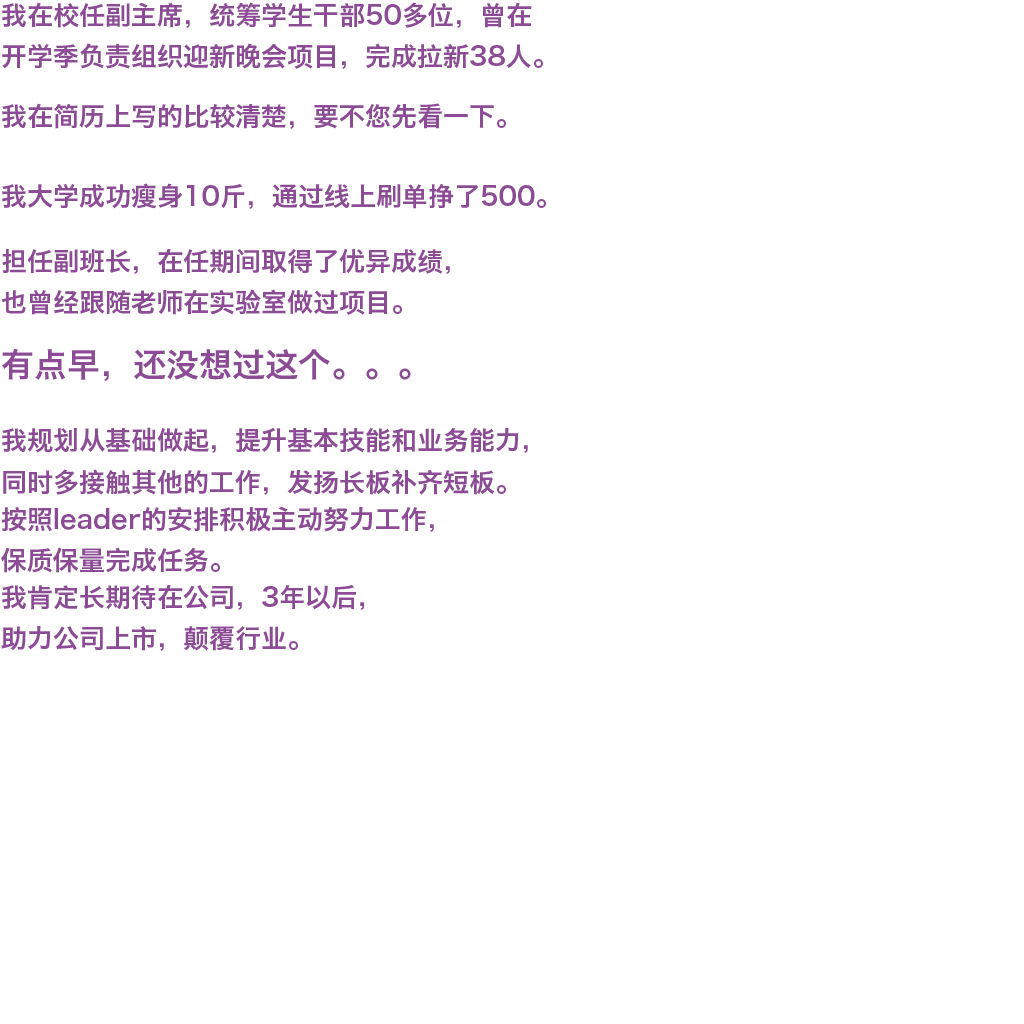
<style>
.page{position:relative;width:1024px;height:1024px;background:#ffffff}
.page>*{position:absolute;margin:0}
.t1{font:26px/41.6px "HiraginoSansGB-W6";color:#8c4b95}
.t2{font:26px "HiraginoSansGB-W6";color:#8c4b95}
.t3{font:33px "HiraginoSansGB-W6";color:#8c4b95}
</style>
<div class="page">
<p class="t1" style="left:2px;top:2px;width:541px;height:67px;text-align:justify">我在校任副主席，统筹学生干部50多位，曾在<br>开学季负责组织迎新晚会项目，完成拉新38人。</p>
<p class="t2" style="left:2px;top:103px;width:504px;height:26px">我在简历上写的比较清楚，要不您先看一下。</p>
<p class="t2" style="left:2px;top:183px;width:544px;height:26px">我大学成功瘦身10斤，通过线上刷单挣了500。</p>
<p class="t1" style="left:2px;top:248px;width:448px;height:67px;text-align:justify">担任副班长，在任期间取得了优异成绩，<br>也曾经跟随老师在实验室做过项目。</p>
<p class="t3" style="left:2px;top:349px;width:409px;height:32px">有点早，还没想过这个。。。</p>
<p class="t1" style="left:2px;top:427px;width:526px;height:68px;text-align:justify">我规划从基础做起，提升基本技能和业务能力，<br>同时多接触其他的工作，发扬长板补齐短板。</p>
<p class="t1" style="left:1px;top:506px;width:433px;height:67px;text-align:justify">按照leader的安排积极主动努力工作，<br>保质保量完成任务。</p>
<p class="t1" style="left:1px;top:584px;width:363px;height:67px;text-align:justify">我肯定长期待在公司，3年以后，<br>助力公司上市，颠覆行业。</p>
</div>
